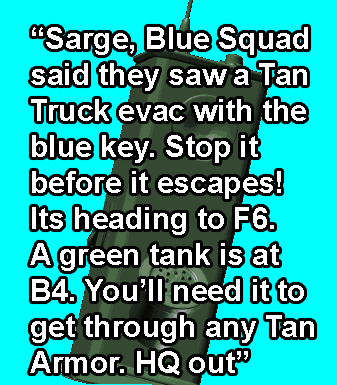
<style>
.page{position:relative;width:337px;height:385px;background:#00ffff}
.page>*{position:absolute;margin:0}
.t1{font:30px "Arial-BoldMT";color:#ffffff}
</style>
<div class="page">
<p class="t1" style="left:30px;top:27px;width:284px;height:348px">“Sarge, Blue Squad<br>said they saw a Tan<br>Truck evac with the<br>blue key. Stop it <br>before it escapes!<br>Its heading to F6. <br>A green tank is at <br>B4. You’ll need it to<br>get through any Tan <br>Armor. HQ out”</p>
</div>
